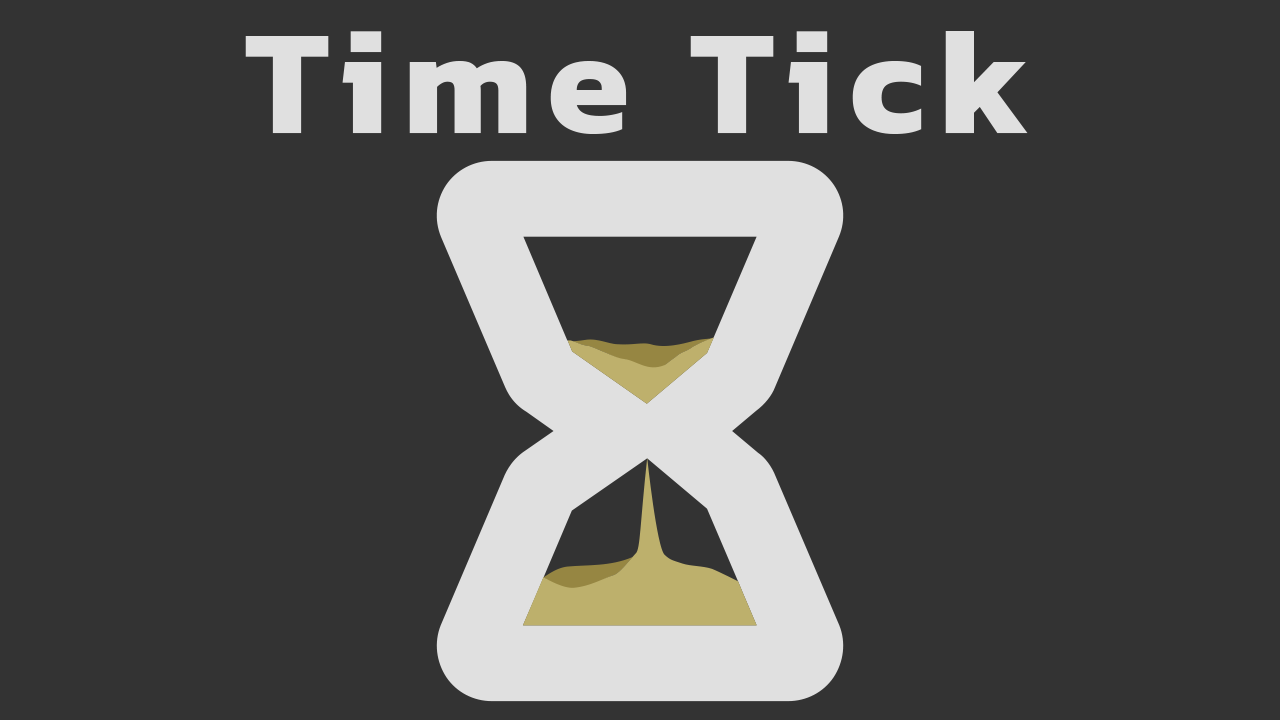
<style>
.page{position:relative;width:1280px;height:720px;background:#333333}
.page>*{position:absolute;margin:0}
.t1{font:150px "Kanit-Bold";letter-spacing:0.1em;color:#e0e0e0}
</style>
<div class="page">
<p class="t1" style="left:245px;top:31px;width:783px;height:103px">Time Tick</p>
</div>
